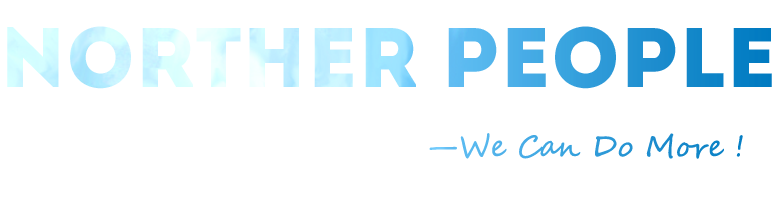
<style>
.page{position:relative;width:780px;height:200px;background:#ffffff}
.page>*{position:absolute;margin:0}
.t1{font:85px "Intro"}
.t2{font:30px "SegoeScript"}
</style>
<div class="page">
<p class="t1" style="left:7px;top:26px;width:765px;height:63px">NORTHER PEOPLE</p>
<p class="t2" style="left:429px;top:133px;width:314px;height:26px">—We Can Do More !</p>
</div>
